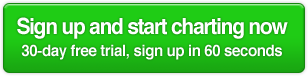
<style>
.page{position:relative;width:308px;height:76px}
.page>*{position:absolute;margin:0}
.t1{font:22.1px "Helvetica-Bold";letter-spacing:-0.06em;color:#ffffff;scale:0.95 1}
.t2{font:15.8px "Helvetica-Bold";letter-spacing:-0.025em;color:#ffffff;scale:0.95 1}
</style>
<div class="page">
<p class="t1" style="left:17px;top:17px;width:271px;height:22px">Sign up and start charting now</p>
<p class="t2" style="left:21px;top:44px;width:261px;height:16px">30-day free trial, sign up in 60 seconds</p>
</div>
